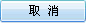
<style>
.page{position:relative;width:86px;height:23px}
.page>*{position:absolute;margin:0}
.t1{font:12px "SimSun";letter-spacing:0.05em;color:#000000}
</style>
<div class="page">
<p class="t1" style="left:29px;top:5px;width:29px;height:11px">取 消</p>
</div>
